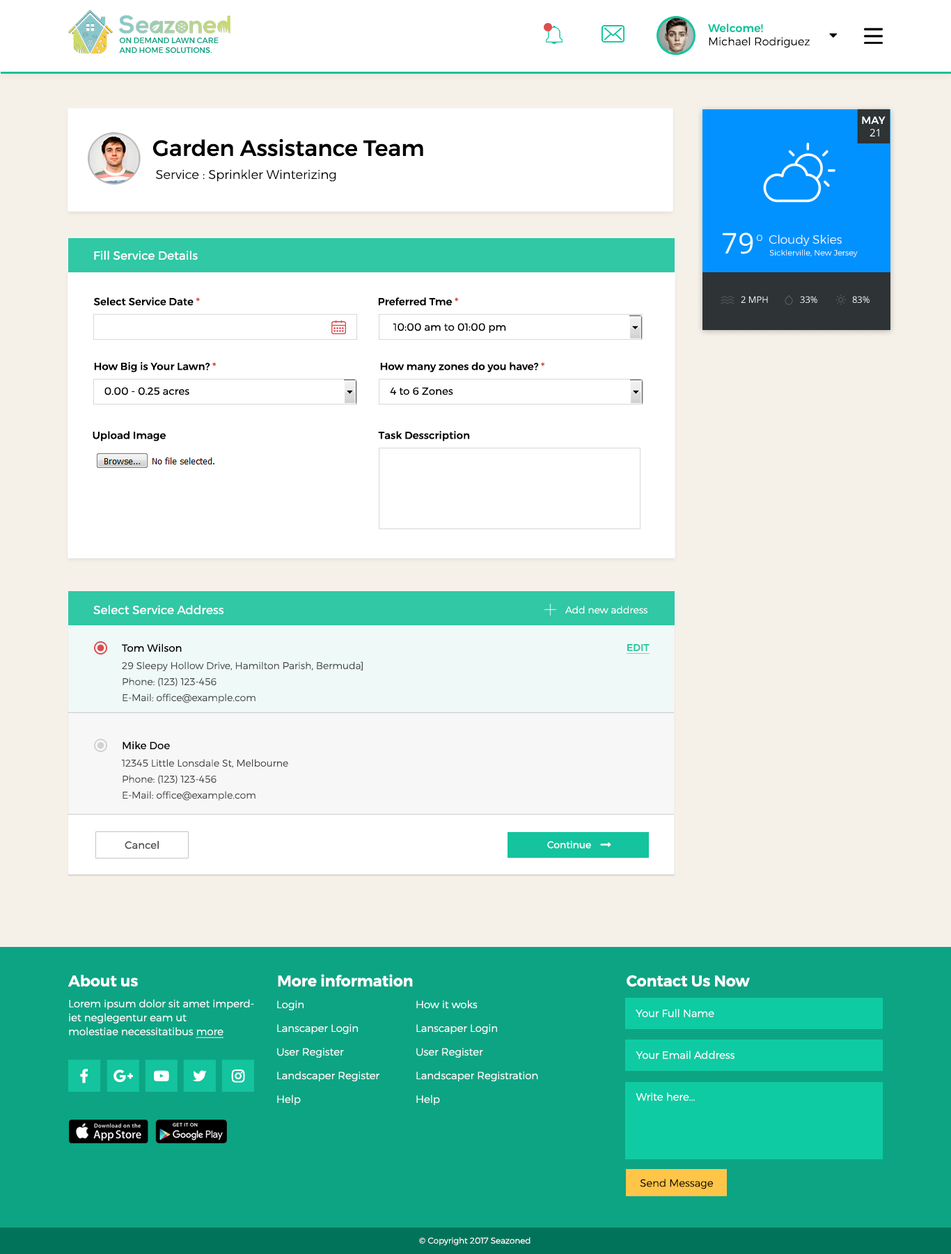
<style>
.page{position:relative;width:951px;height:1254px;background:#f5f1e9}
.page>*{position:absolute;margin:0}
.t1{font:11.1px "Montserrat-Light";color:#000000}
.t2{font:11.1px "Montserrat-Medium";color:#13c49e}
.t3{font:7.7px "Montserrat-Medium";color:#0da484;text-transform:uppercase}
.t4{font:10.4px "Montserrat-Medium";color:#ffffff}
.t5{font:10.4px "OpenSans";color:#ffffff}
.t6{font:22.3px "Montserrat-Medium";color:#000000}
.t7{font:12.5px "Montserrat-Light";color:#000000}
.t8{font:4px "Montserrat-Light";color:#ffffff}
.t9{font:28.6px "OpenSans";color:#ffffff;text-transform:uppercase}
.t10{font:8.3px "OpenSans";color:#ffffff;text-transform:uppercase}
.t11{font:11.9px "Montserrat-Light";color:#ffffff}
.t12{font:11.8px "Montserrat-Regular";color:#ffffff}
.t13{font:7.9px "Montserrat-Light";color:#ffffff}
.t14{font:10.4px "Montserrat-Medium";color:#000000}
.t15{font:10.4px "Montserrat-Medium";color:#de4d4f}
.t16{font:9.1px "OpenSans";color:#ffffff;text-transform:uppercase}
.t17{font:10.4px "Montserrat-Regular";color:#000000}
.t18{font:9.7px "Montserrat-Light";color:#ffffff}
.t19{font:9.7px "Montserrat-Medium";color:#30c8a5;text-decoration:underline}
.t20{font:9.7px/16px "Montserrat-Light";color:#474747}
.t21{font:10.4px "Montserrat-Regular";color:#505050}
.t22{font:9.7px "Montserrat-Regular";color:#ffffff}
.t23{font:15.3px "Montserrat-SemiBold";color:#ffffff}
.t24{font:10.4px/13.9px "Montserrat-Light";color:#ffffff}
.t25{font:10.4px/13.9px "Montserrat-Light";color:#ffffff;text-decoration:underline}
.t26{font:10.4px/23.7px "Montserrat-Light";color:#ffffff}
.t27{font:10.4px "Montserrat-Light";color:#ffffff}
.t28{font:10.4px "Montserrat-Light";color:#000000}
.t29{font:8.4px "Montserrat-Light";color:#ffffff}
</style>
<div class="page">
<p class="t1" style="left:708px;top:24px;width:102px;height:24px"><span class="t2">Welcome! <br></span>Michael Rodriguez</p>
<p class="t3" style="left:119px;top:38px;width:100px;height:15px">on demand lawn care <br>and home solutions.</p>
<p class="t4" style="left:862px;top:116px;width:24px;height:8px">MAY</p>
<p class="t5" style="left:870px;top:129px;width:9px;height:7px">21</p>
<p class="t6" style="left:152px;top:139px;width:271px;height:18px">Garden Assistance Team</p>
<p class="t7" style="left:156px;top:169px;width:180px;height:13px">Service : Sprinkler Winterizing</p>
<p class="t8" style="left:107px;top:178px;width:15px;height:4px">Change</p>
<p class="t9" style="left:723px;top:233px;width:30px;height:21px">79</p>
<p class="t10" style="left:757px;top:235px;width:5px;height:6px">o</p>
<p class="t11" style="left:769px;top:235px;width:73px;height:11px">Cloudy Skies</p>
<p class="t12" style="left:94px;top:251px;width:104px;height:9px">Fill Service Details</p>
<p class="t13" style="left:769px;top:249px;width:89px;height:9px">Sicklerville, New Jersey</p>
<p class="t14" style="left:93px;top:297px;width:107px;height:9px">Select Service Date <span class="t15">*</span></p>
<p class="t14" style="left:378px;top:297px;width:81px;height:9px">Preferred Tme <span class="t15">*</span></p>
<p class="t16" style="left:741px;top:296px;width:27px;height:7px">2 MPH</p>
<p class="t16" style="left:800px;top:296px;width:17px;height:8px">33%</p>
<p class="t16" style="left:852px;top:296px;width:18px;height:8px">83%</p>
<p class="t17" style="left:393px;top:323px;width:113px;height:10px">10:00 am to 01:00 pm</p>
<p class="t14" style="left:94px;top:362px;width:122px;height:10px">How Big is Your Lawn? <span class="t15">*</span></p>
<p class="t14" style="left:380px;top:362px;width:164px;height:10px">How many zones do you have? <span class="t15">*</span></p>
<p class="t17" style="left:104px;top:387px;width:85px;height:8px">0.00 - 0.25 acres</p>
<p class="t17" style="left:390px;top:387px;width:63px;height:8px">4 to 6 Zones</p>
<p class="t14" style="left:93px;top:431px;width:73px;height:10px">Upload Image</p>
<p class="t14" style="left:378px;top:431px;width:92px;height:10px">Task Desscription</p>
<p class="t12" style="left:93px;top:605px;width:131px;height:10px">Select Service Address</p>
<p class="t18" style="left:565px;top:606px;width:82px;height:8px">Add new address</p>
<p class="t17" style="left:122px;top:643px;width:60px;height:9px">Tom Wilson</p>
<p class="t19" style="left:627px;top:644px;width:23px;height:10px">EDIT</p>
<p class="t20" style="left:122px;top:661px;width:241px;height:42px">29 Sleepy Hollow Drive, Hamilton Parish, Bermuda]<br>Phone: (123) 123-456<br>E-Mail: office@example.com</p>
<p class="t17" style="left:123px;top:741px;width:47px;height:9px">Mike Doe</p>
<p class="t20" style="left:122px;top:759px;width:166px;height:42px">12345 Little Lonsdale St, Melbourne<br>Phone: (123) 123-456<br>E-Mail: office@example.com</p>
<p class="t21" style="left:125px;top:840px;width:34px;height:9px">Cancel</p>
<p class="t22" style="left:547px;top:840px;width:44px;height:9px">Continue</p>
<p class="t23" style="left:68px;top:975px;width:70px;height:12px">About us</p>
<p class="t23" style="left:278px;top:974px;width:135px;height:13px">More information</p>
<p class="t23" style="left:627px;top:975px;width:123px;height:12px">Contact Us Now</p>
<p class="t24" style="left:69px;top:999px;width:185px;height:39px">Lorem ipsum dolor sit amet imperdiet neglegentur eam ut<br>molestiae necessitatibus <span class="t25">more</span></p>
<p class="t26" style="left:277px;top:1000px;width:102px;height:105px">Login<br>Lanscaper Login<br>User Register<br>Landscaper Register<br>Help</p>
<p class="t26" style="left:416px;top:1000px;width:122px;height:105px">How it woks<br>Lanscaper Login<br>User Register<br>Landscaper Registration<br>Help</p>
<p class="t27" style="left:636px;top:1009px;width:78px;height:8px">Your Full Name</p>
<p class="t27" style="left:636px;top:1051px;width:98px;height:8px">Your Email Address</p>
<p class="t27" style="left:636px;top:1092px;width:59px;height:9px">Write here...</p>
<p class="t28" style="left:640px;top:1179px;width:73px;height:10px">Send Message</p>
<p class="t29" style="left:419px;top:1237px;width:112px;height:9px">© Copyright 2017 Seazoned</p>
</div>
